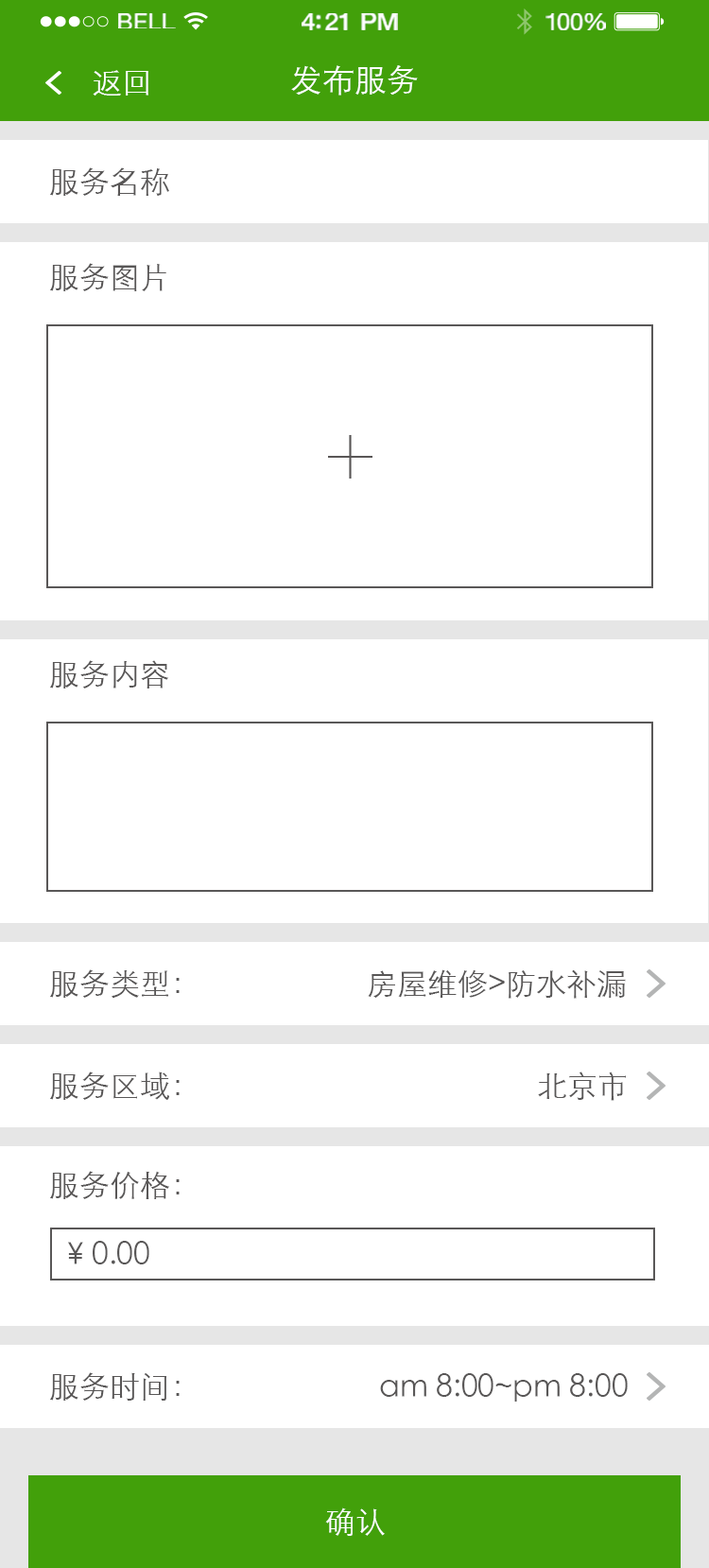
<style>
.page{position:relative;width:709px;height:1568px;background:#ffffff}
.page>*{position:absolute;margin:0}
.t1{font:22px "HelveticaNeue";letter-spacing:0.02em;color:#ffffff;scale:1.06 1}
.t2{font:23.9px "HelveticaNeue-Medium";letter-spacing:-0.02em;color:#ffffff;scale:1.06 1}
.t3{font:23px "HelveticaNeue";letter-spacing:-0.02em;color:#ffffff;scale:1.06 1}
.t4{font:32.2px "STXihei";color:#ffffff}
.t5{font:30.3px "STXihei";color:#ffffff}
.t6{font:30.3px "STXihei";color:#595757}
</style>
<div class="page">
<p class="t1" style="left:118px;top:13px;width:58px;height:15px">BELL</p>
<p class="t2" style="left:302px;top:13px;width:96px;height:17px">4:21 PM</p>
<p class="t3" style="left:546px;top:13px;width:60px;height:17px">100%</p>
<p class="t4" style="left:291px;top:65px;width:127px;height:31px">发布服务</p>
<p class="t5" style="left:93px;top:70px;width:55px;height:26px">返回</p>
<p class="t6" style="left:50px;top:167px;width:119px;height:29px">服务名称</p>
<p class="t6" style="left:50px;top:263px;width:116px;height:28px">服务图片</p>
<p class="t6" style="left:50px;top:660px;width:118px;height:28px">服务内容</p>
<p class="t6" style="left:50px;top:969px;width:130px;height:30px">服务类型：</p>
<p class="t6" style="left:368px;top:969px;width:258px;height:30px">房屋维修&gt;防水补漏</p>
<p class="t6" style="left:50px;top:1071px;width:130px;height:29px">服务区域：</p>
<p class="t6" style="left:538px;top:1071px;width:88px;height:30px">北京市</p>
<p class="t6" style="left:50px;top:1171px;width:130px;height:28px">服务价格：</p>
<p class="t6" style="left:68px;top:1241px;width:81px;height:23px">¥ 0.00</p>
<p class="t6" style="left:50px;top:1372px;width:130px;height:29px">服务时间：</p>
<p class="t6" style="left:380px;top:1373px;width:248px;height:29px">am 8:00~pm 8:00</p>
<p class="t5" style="left:325px;top:1507px;width:60px;height:29px">确认</p>
</div>
